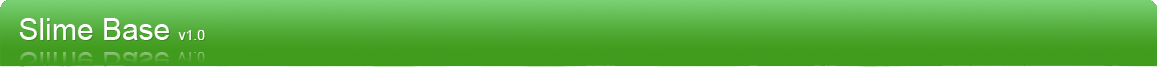
<style>
.page{position:relative;width:1157px;height:67px}
.page>*{position:absolute;margin:0}
.t1{font:30px "ArialMT";color:#ffffff}
.t2{font:14px "ArialMT";color:#ffffff}
</style>
<div class="page">
<p class="t1" style="left:19px;top:18px;width:186px;height:22px">Slime Base <span class="t2">v1.0</span></p>
</div>
